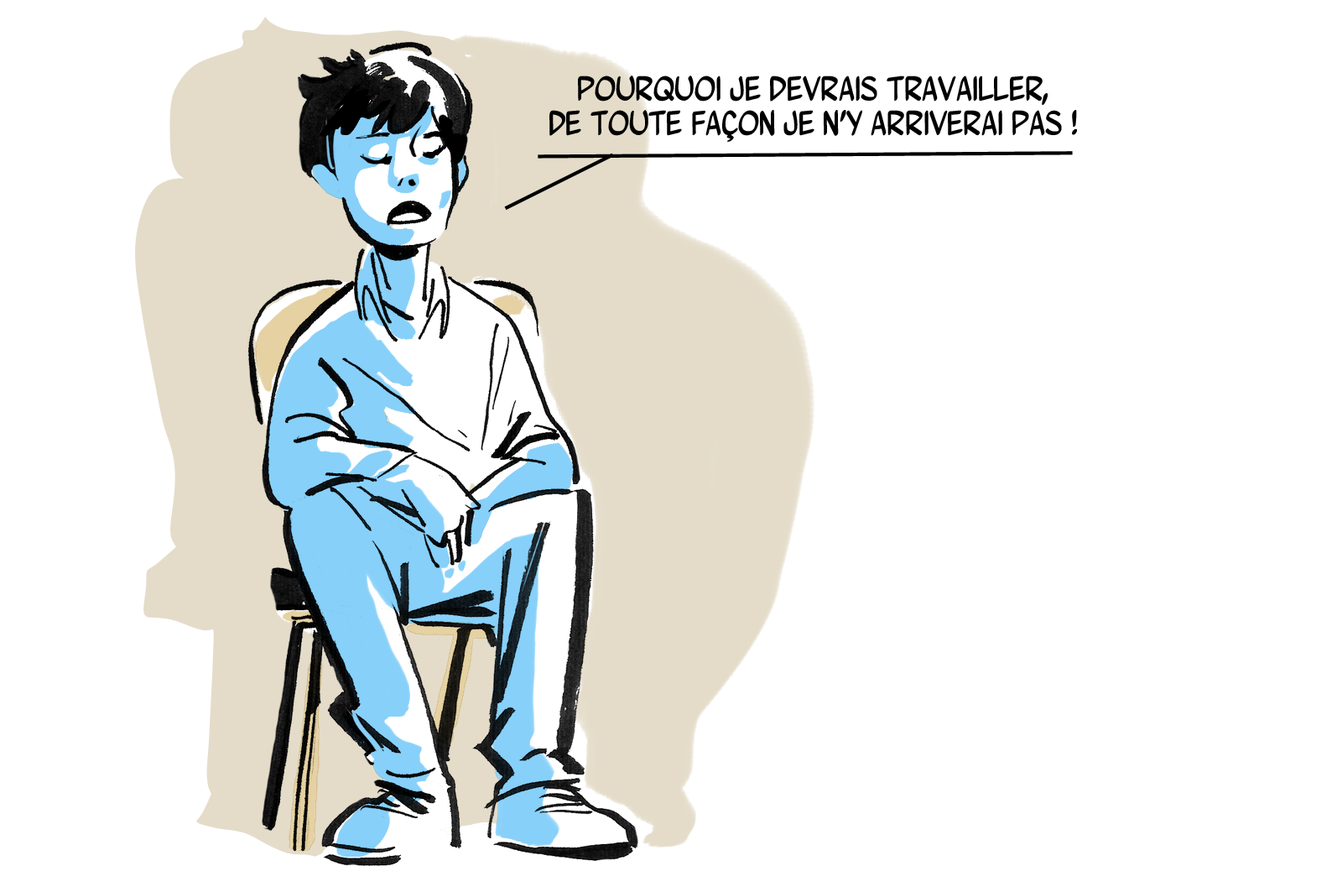
<style>
.page{position:relative;width:1337px;height:892px;background:#ffffff}
.page>*{position:absolute;margin:0}
.t1{font:35px/35px "WurmicsBravo";color:#000000}
</style>
<div class="page">
<p class="t1" style="left:549px;top:76px;width:528px;height:66px;text-align:center">Pourquoi je devrais travailler,<br>de toute façon je n’y arriverai pas !</p>
</div>
